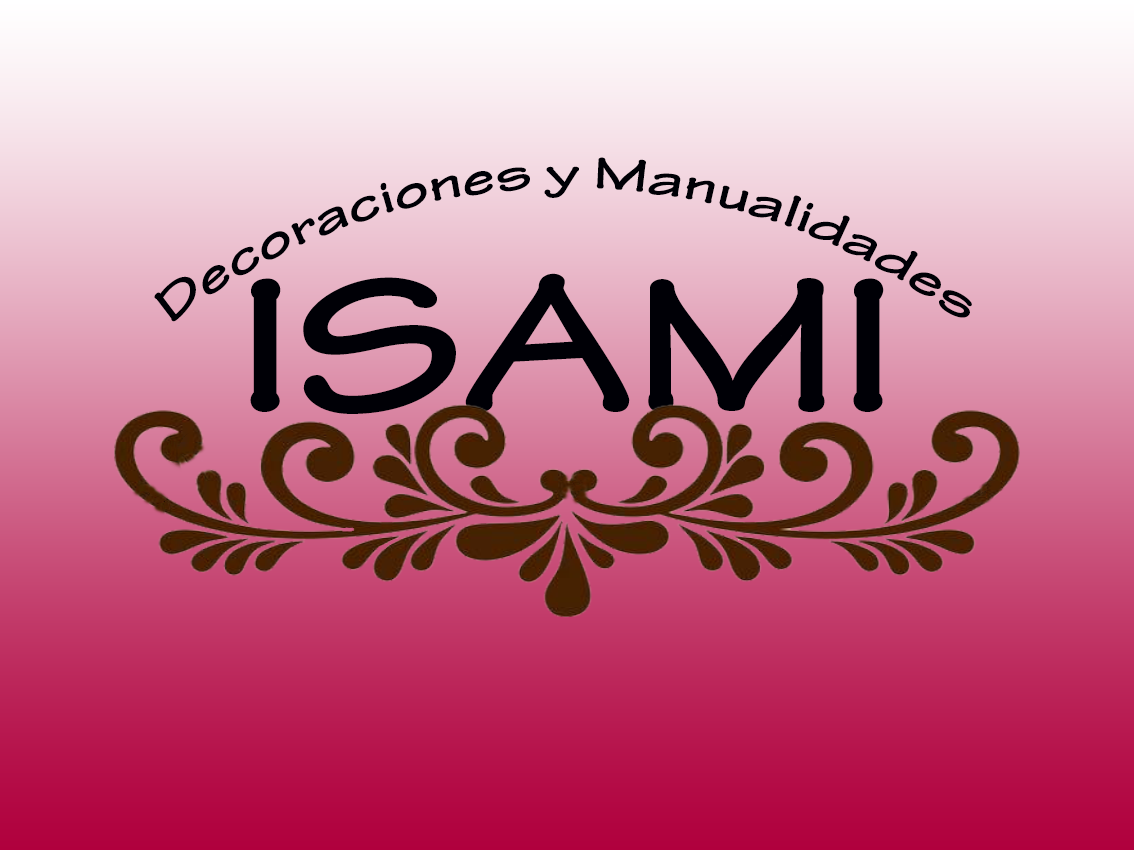
<style>
.page{position:relative;width:1134px;height:850px}
.page>*{position:absolute;margin:0}
.t1{font:48px "TektonPro-BoldExt";color:#000006}
.t2{font:205px "TektonPro-BoldExt";color:#000006}
</style>
<div class="page">
<p class="t1" style="left:154px;top:157px;width:818px;height:165px;text-align:center">Decoraciones y Manualidades</p>
<p class="t2" style="left:250px;top:273px;width:634px;height:141px">ISAMI</p>
</div>
